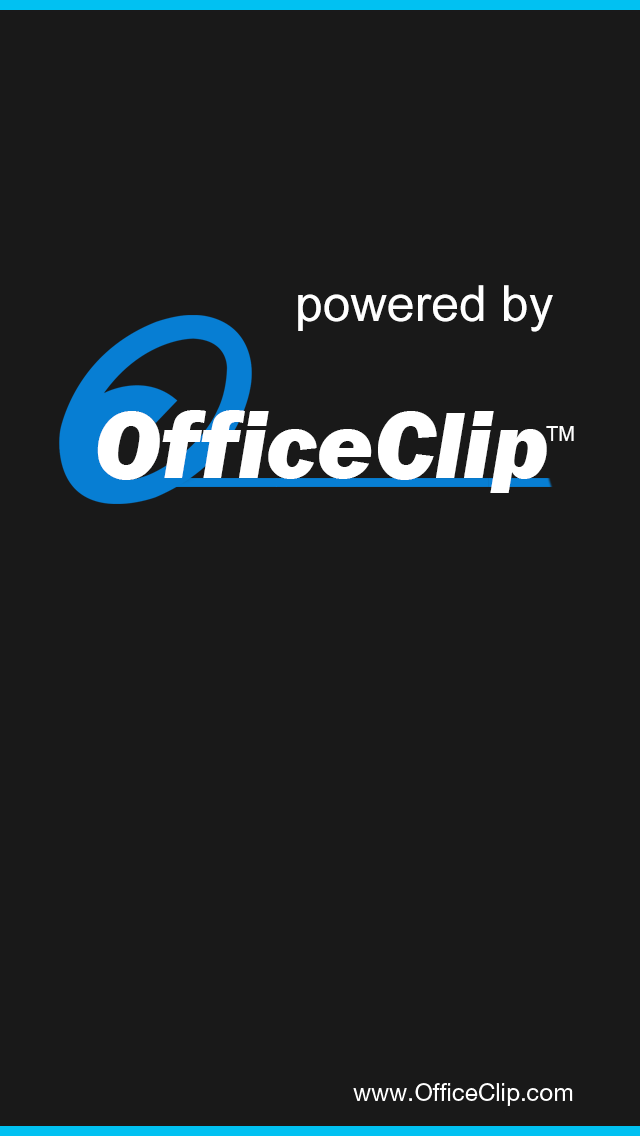
<style>
.page{position:relative;width:640px;height:1136px;background:#191919}
.page>*{position:absolute;margin:0}
.t1{font:50px "ArialMT";color:#ffffff}
.t2{font:97px "FranklinGothic-HeavyItalic";color:#ffffff}
.t3{font:20px "ArialMT";color:#ffffff}
</style>
<div class="page">
<p class="t1" style="left:298px;top:285px;width:255px;height:47px">powered by</p>
<p class="t2" style="left:97px;top:410px;width:450px;height:83px">OfficeClip</p>
<p class="t3" style="left:546px;top:426px;width:28px;height:15px">TM</p>
</div>
